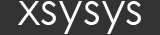
<style>
.page{position:relative;width:160px;height:35px;background:#333333}
.page>*{position:absolute;margin:0}
.t1{font:45.8px "CenturyGothic";color:#ffffff}
</style>
<div class="page">
<p class="t1" style="left:18px;top:1px;width:123px;height:33px">xsysys</p>
</div>
